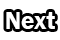
<style>
.page{position:relative;width:60px;height:40px;background:#ffffff}
.page>*{position:absolute;margin:0}
.t1{font:25px "FranklinGothic-Demi";color:#ffffff}
</style>
<div class="page">
<p class="t1" style="left:6px;top:12px;width:49px;height:17px">Next</p>
</div>
